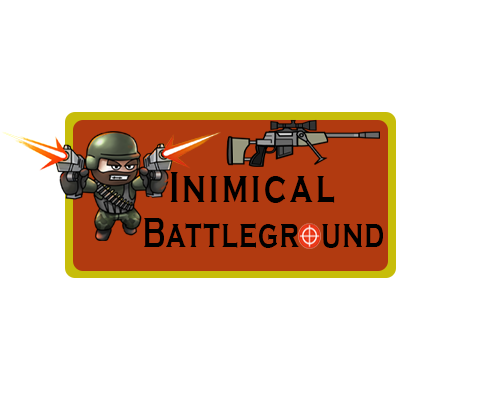
<style>
.page{position:relative;width:500px;height:400px;background:#ffffff}
.page>*{position:absolute;margin:0}
.t1{font:45.8px "CopperplateGothic-Bold";letter-spacing:0.1em;color:#000000;scale:0.71 1}
.t2{font:42.5px "CopperplateGothic-Bold";letter-spacing:0.05em;color:#000000;scale:0.67 1}
</style>
<div class="page">
<p class="t1" style="left:170px;top:172px;width:165px;height:31px">Inimical</p>
<p class="t2" style="left:144px;top:218px;width:239px;height:30px">Battleground</p>
</div>
